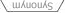
<style>
.page{position:relative;width:65px;height:13px;background:#fefefe}
.page>*{position:absolute;margin:0}
.t1{font:10px "Tahoma";letter-spacing:0.01em;color:#8e8e8e}
</style>
<div class="page">
<p class="t1" style="left:12px;top:0px;width:41px;height:11px;rotate:180deg">Synonym</p>
</div>
